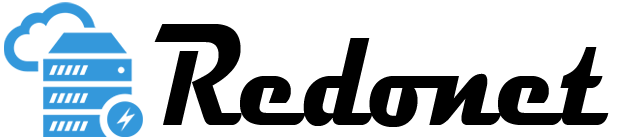
<style>
.page{position:relative;width:619px;height:140px;background:#ffffff}
.page>*{position:absolute;margin:0}
.t1{font:148px "Magneto-Bold";color:#000000;scale:0.7 1}
</style>
<div class="page">
<p class="t1" style="left:154px;top:24px;width:455px;height:103px">Redonet</p>
</div>
